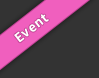
<style>
.page{position:relative;width:99px;height:78px;background:#333333}
.page>*{position:absolute;margin:0}
.t1{font:14px "SourceSansPro-Semibold";letter-spacing:0.075em;color:#ffffff}
</style>
<div class="page">
<p class="t1" style="left:14px;top:14px;width:35px;height:29px;rotate:-38deg">Event</p>
</div>
